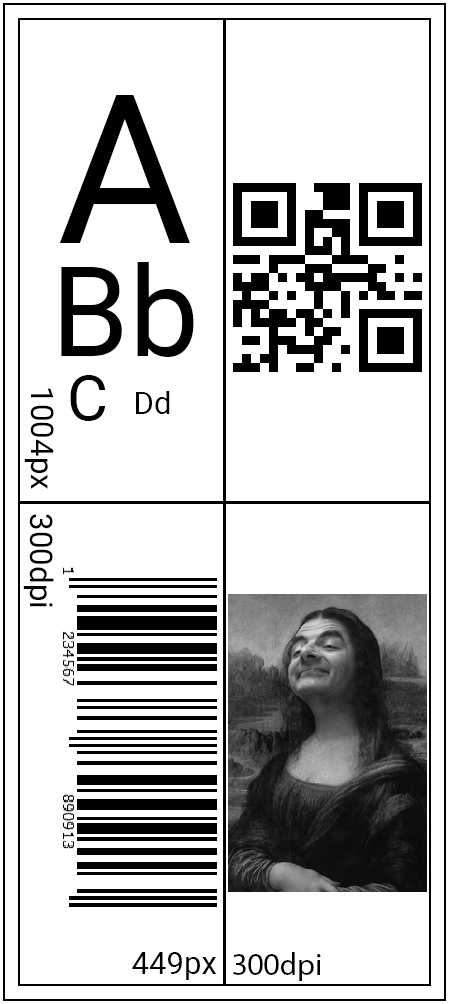
<style>
.page{position:relative;width:449px;height:1004px;background:#ffffff}
.page>*{position:absolute;margin:0}
.t1{font:208.3px "Roboto-Regular";color:#000000}
.t2{font:125px "Roboto-Regular";color:#000000}
.t3{font:62.5px "Roboto-Regular";color:#000000}
.t4{font:31.2px "Roboto-Regular";color:#000000}
.t5{font:31.2px "MyriadPro-Regular";color:#000000}
</style>
<div class="page">
<p class="t1" style="left:59px;top:95px;width:131px;height:148px">A</p>
<p class="t2" style="left:61px;top:262px;width:133px;height:95px">Bb</p>
<p class="t3" style="left:70px;top:375px;width:36px;height:46px">C</p>
<p class="t4" style="left:24px;top:388px;width:30px;height:101px;rotate:90deg">1004px</p>
<p class="t4" style="left:136px;top:391px;width:34px;height:23px">Dd</p>
<p class="t4" style="left:23px;top:514px;width:31px;height:93px;rotate:90deg">300dpi</p>
<p class="t4" style="left:132px;top:952px;width:85px;height:28px">449px</p>
<p class="t5" style="left:233px;top:952px;width:88px;height:29px">300dpi</p>
</div>
